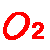
<style>
.page{position:relative;width:50px;height:50px;background:#ffffff}
.page>*{position:absolute;margin:0}
.t1{font:36px "SegoeScript";color:#ff0000;font-weight:bold}
.t2{font:24px "Shruti-Bold";color:#ff0000;font-weight:bold}
</style>
<div class="page">
<p class="t1" style="left:3px;top:12px;width:41px;height:28px">O<span class="t2">2</span></p>
</div>
